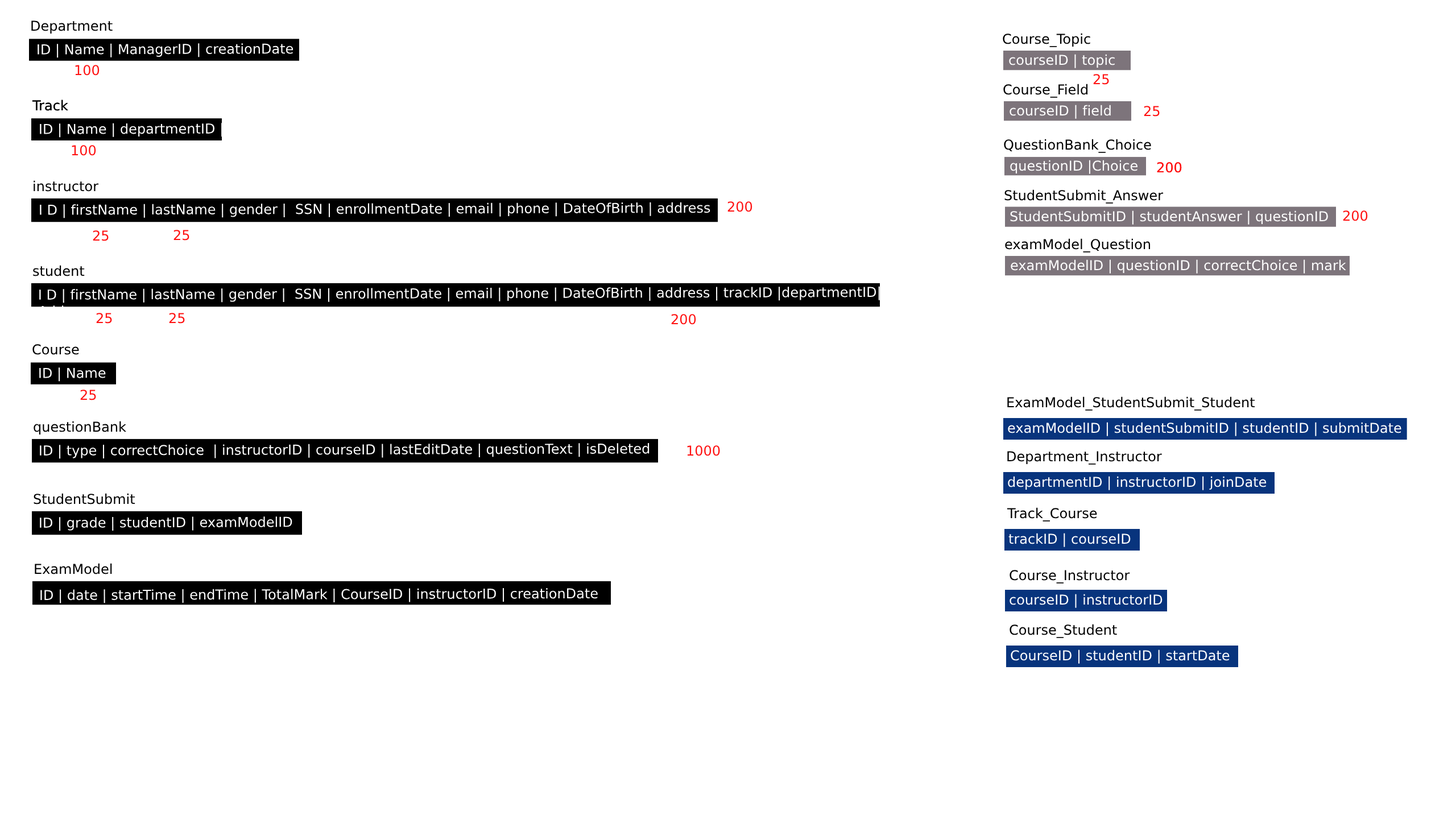
<style>
.page{position:relative;width:1456px;height:819px;background:#ffffff}
.page>*{position:absolute;margin:0}
.t1{font:13.6px "DejaVuSans";color:#000000}
.t2{font:13.6px "DejaVuSans";color:#ffffff}
.t3{font:13.6px "DejaVuSans";color:#ff1212}
</style>
<div class="page">
<p class="t1" style="left:31px;top:20px;width:82px;height:14px">Department</p>
<p class="t1" style="left:1003px;top:33px;width:87px;height:14px">Course_Topic</p>
<p class="t2" style="left:38px;top:43px;width:255px;height:15px">ID | Name | ManagerID | creationDate</p>
<p class="t3" style="left:75px;top:65px;width:25px;height:11px">100</p>
<p class="t2" style="left:1009px;top:54px;width:106px;height:14px">courseID | topic</p>
<p class="t3" style="left:1093px;top:74px;width:16px;height:11px">25</p>
<p class="t1" style="left:1003px;top:84px;width:85px;height:14px">Course_Field</p>
<p class="t1" style="left:32px;top:100px;width:36px;height:11px">Track</p>
<p class="t1" style="left:32px;top:100px;width:36px;height:11px">Track</p>
<p class="t2" style="left:1010px;top:105px;width:101px;height:14px">courseID | field</p>
<p class="t3" style="left:1144px;top:106px;width:16px;height:11px">25</p>
<p class="t2" style="left:40px;top:123px;width:183px;height:15px">ID | Name | departmentID |</p>
<p class="t2" style="left:40px;top:123px;width:183px;height:15px">ID | Name | departmentID |</p>
<p class="t3" style="left:72px;top:145px;width:24px;height:11px">100</p>
<p class="t1" style="left:1004px;top:139px;width:147px;height:14px">QuestionBank_Choice</p>
<p class="t2" style="left:1010px;top:160px;width:127px;height:14px">questionID |Choice</p>
<p class="t3" style="left:1157px;top:162px;width:25px;height:11px">200</p>
<p class="t3" style="left:1157px;top:162px;width:25px;height:11px">200</p>
<p class="t1" style="left:34px;top:180px;width:65px;height:12px">instructor</p>
<p class="t1" style="left:1004px;top:189px;width:160px;height:15px">StudentSubmit_Answer</p>
<p class="t2" style="left:40px;top:202px;width:670px;height:16px">I D | firstName | lastName | gender |  SSN | enrollmentDate | email | phone | DateOfBirth | address</p>
<p class="t3" style="left:727px;top:201px;width:25px;height:11px">200</p>
<p class="t2" style="left:1010px;top:210px;width:318px;height:15px">StudentSubmitID | studentAnswer | questionID</p>
<p class="t3" style="left:1343px;top:210px;width:25px;height:11px">200</p>
<p class="t3" style="left:93px;top:230px;width:16px;height:11px">25</p>
<p class="t3" style="left:173px;top:230px;width:16px;height:11px">25</p>
<p class="t1" style="left:1005px;top:238px;width:145px;height:15px">examModel_Question</p>
<p class="t1" style="left:33px;top:265px;width:52px;height:11px">student</p>
<p class="t2" style="left:1011px;top:259px;width:335px;height:15px">examModelID | questionID | correctChoice | mark</p>
<p class="t3" style="left:96px;top:313px;width:16px;height:11px">25</p>
<p class="t3" style="left:169px;top:313px;width:16px;height:11px">25</p>
<p class="t3" style="left:671px;top:314px;width:25px;height:11px">200</p>
<p class="t1" style="left:32px;top:344px;width:47px;height:11px">Course</p>
<p class="t2" style="left:39px;top:367px;width:67px;height:15px">ID | Name</p>
<p class="t3" style="left:80px;top:390px;width:16px;height:10px">25</p>
<p class="t1" style="left:1007px;top:396px;width:248px;height:15px">ExamModel_StudentSubmit_Student</p>
<p class="t1" style="left:34px;top:421px;width:92px;height:14px">questionBank</p>
<p class="t2" style="left:1008px;top:422px;width:393px;height:14px">examModelID | studentSubmitID | studentID | submitDate</p>
<p class="t2" style="left:40px;top:443px;width:610px;height:16px">ID | type | correctChoice  | instructorID | courseID | lastEditDate | questionText | isDeleted</p>
<p class="t3" style="left:687px;top:445px;width:33px;height:11px">1000</p>
<p class="t1" style="left:1007px;top:451px;width:155px;height:14px">Department_Instructor</p>
<p class="t2" style="left:1008px;top:476px;width:259px;height:14px">departmentID | instructorID | joinDate</p>
<p class="t1" style="left:34px;top:493px;width:101px;height:11px">StudentSubmit</p>
<p class="t1" style="left:1007px;top:507px;width:90px;height:15px">Track_Course</p>
<p class="t2" style="left:40px;top:516px;width:252px;height:15px">ID | grade | studentID | examModelID</p>
<p class="t2" style="left:1008px;top:533px;width:123px;height:14px">trackID | courseID</p>
<p class="t1" style="left:35px;top:563px;width:77px;height:11px">ExamModel</p>
<p class="t1" style="left:1010px;top:570px;width:120px;height:14px">Course_Instructor</p>
<p class="t2" style="left:40px;top:588px;width:558px;height:15px">ID | date | startTime | endTime | TotalMark | CourseID | instructorID | creationDate</p>
<p class="t2" style="left:1010px;top:594px;width:153px;height:14px">courseID | instructorID</p>
<p class="t1" style="left:1010px;top:624px;width:107px;height:14px">Course_Student</p>
<p class="t2" style="left:1011px;top:650px;width:219px;height:14px">CourseID | studentID | startDate</p>
</div>
